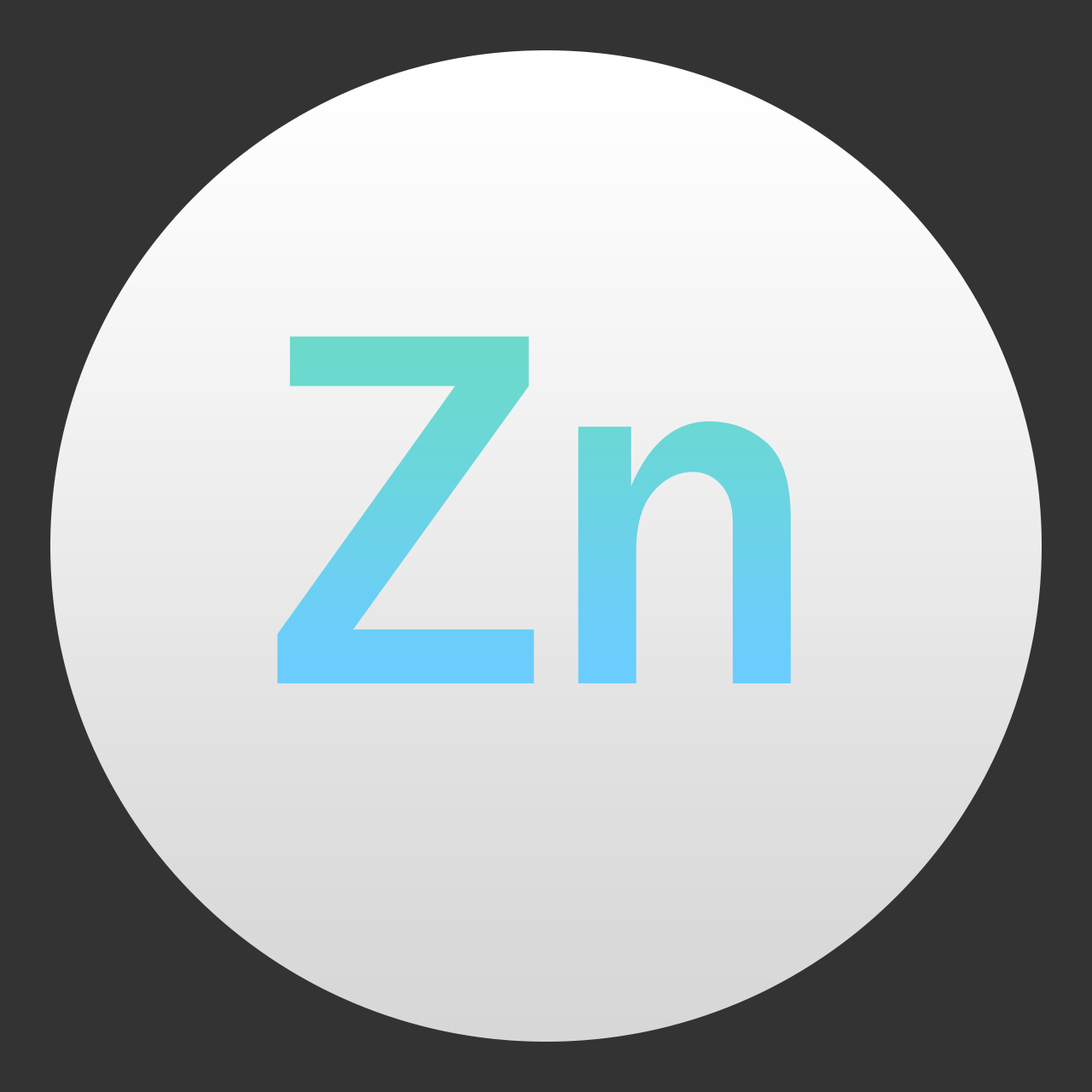
<style>
.page{position:relative;width:1092px;height:1092px;background:#333333}
.page>*{position:absolute;margin:0}
.t1{font:520.1px "FranklinGothic-Medium"}
</style>
<div class="page">
<p class="t1" style="left:277px;top:336px;width:514px;height:347px">Zn</p>
</div>
